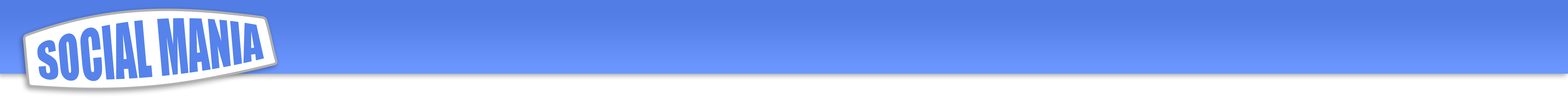
<style>
.page{position:relative;width:1568px;height:99px;background:#ffffff}
.page>*{position:absolute;margin:0}
.t1{font:40.8px "Impact";color:#5683eb}
</style>
<div class="page">
<p class="t1" style="left:37px;top:18px;width:227px;height:63px;rotate:-5deg">SOCIAL MANIA</p>
</div>
